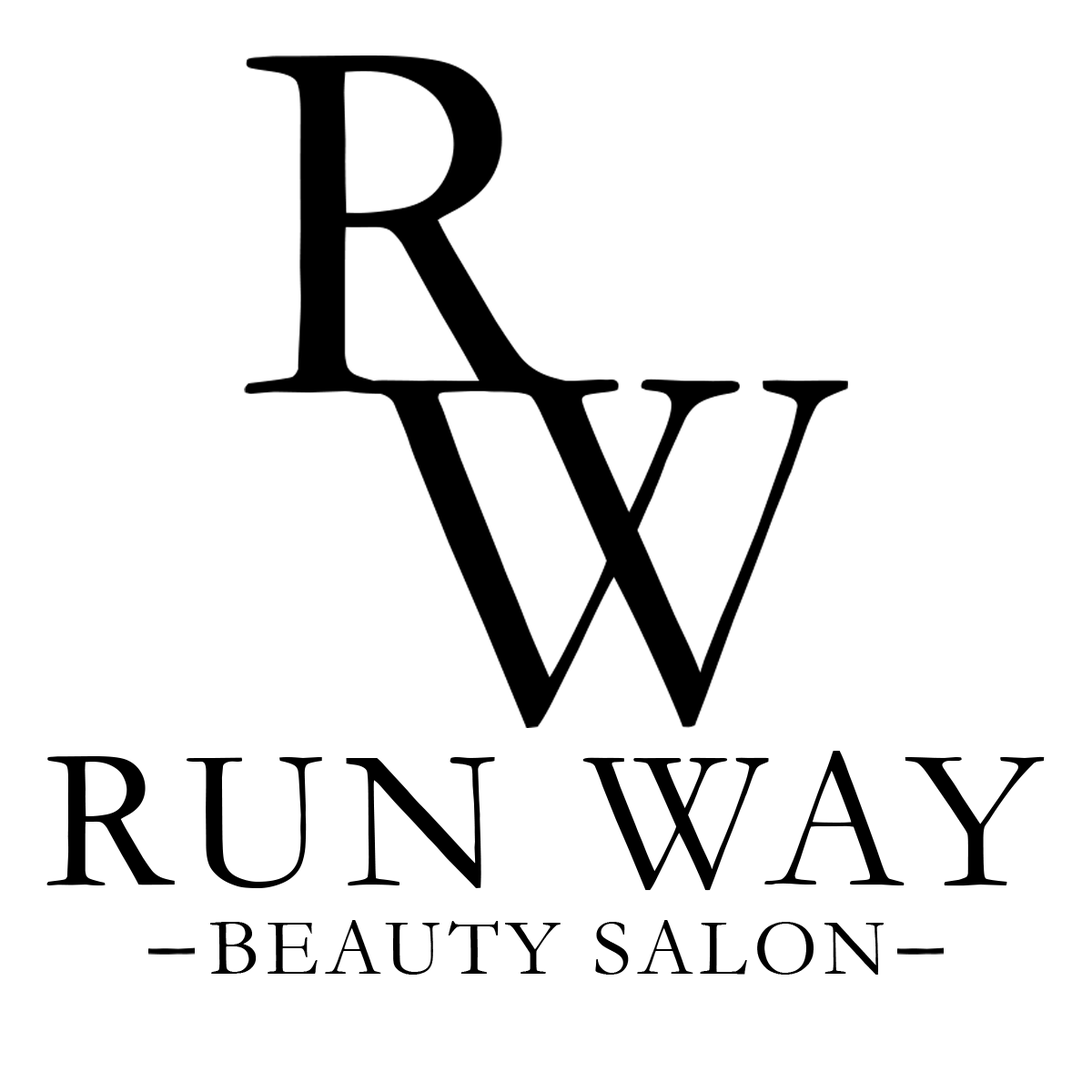
<style>
.page{position:relative;width:1092px;height:1092px;background:#ffffff}
.page>*{position:absolute;margin:0}
.t1{font:203.7px "Garamond";letter-spacing:0.075em;color:#000000;text-transform:uppercase}
.t2{font:81.5px "Garamond";letter-spacing:0.075em;color:#000000;text-transform:uppercase}
</style>
<div class="page">
<p class="t1" style="left:46px;top:751px;width:999px;height:140px">run way</p>
<p class="t2" style="left:210px;top:920px;width:674px;height:55px">beauty salon</p>
</div>
